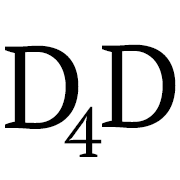
<style>
.page{position:relative;width:180px;height:180px;background:#ffffff}
.page>*{position:absolute;margin:0}
.t1{font:116.2px "PTSerif-Regular";color:#000000}
.t2{font:70.6px "PTSerif-Regular";color:#000000}
</style>
<div class="page">
<p class="t1" style="left:5px;top:45px;width:74px;height:84px">D</p>
<p class="t1" style="left:102px;top:44px;width:74px;height:84px">D</p>
<p class="t2" style="left:64px;top:106px;width:38px;height:51px">4</p>
</div>
